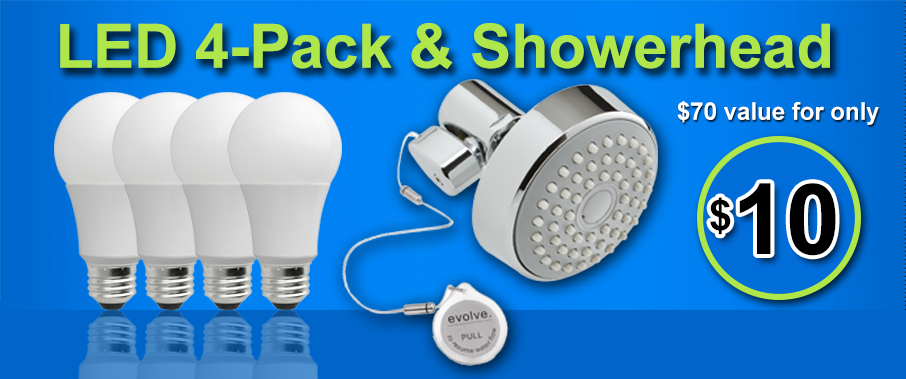
<style>
.page{position:relative;width:906px;height:379px}
.page>*{position:absolute;margin:0}
.t1{font:61.6px "Arial-BoldMT";letter-spacing:-0.005em;color:#afe64a}
.t2{font:24.3px "Arial-BoldMT";letter-spacing:-0.005em;color:#ffffff}
.t3{font:98.2px "Arial-BoldMT";letter-spacing:-0.005em;color:#000000}
.t4{font:72px "Arial-BoldMT";letter-spacing:-0.005em;color:#000000}
</style>
<div class="page">
<p class="t1" style="left:60px;top:23px;width:770px;height:46px">LED 4-Pack &amp; Showerhead</p>
<p class="t2" style="left:677px;top:101px;width:202px;height:24px">$70 value for only</p>
<p class="t3" style="left:710px;top:183px;width:126px;height:73px"><span class="t4">$</span>10</p>
</div>
